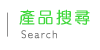
<style>
.page{position:relative;width:100px;height:50px;background:#ffffff}
.page>*{position:absolute;margin:0}
.t1{font:16px "DFYuan-Lt-HK-BF";letter-spacing:0.12em;color:#3ed73a;font-weight:bold}
.t2{font:11px "Humanist521BT-Light";letter-spacing:0.12em;color:#707070;font-weight:bold}
</style>
<div class="page">
<p class="t1" style="left:19px;top:9px;width:71px;height:16px">產品搜尋</p>
<p class="t2" style="left:21px;top:30px;width:36px;height:9px">Search</p>
</div>
